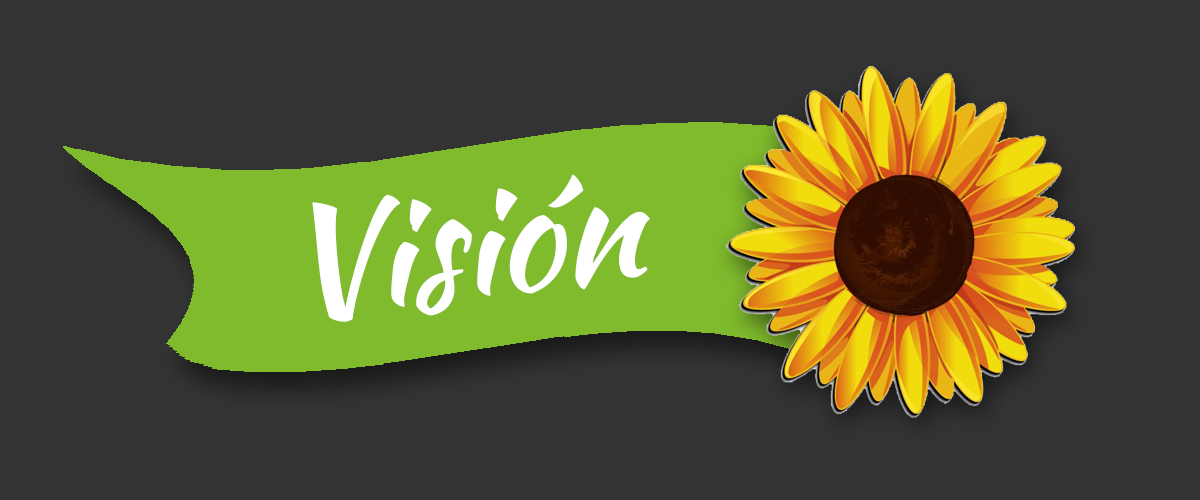
<style>
.page{position:relative;width:1200px;height:500px;background:#333333}
.page>*{position:absolute;margin:0}
.t1{font:150px "KaushanScript-Regular";color:#ffffff}
</style>
<div class="page">
<p class="t1" style="left:312px;top:174px;width:338px;height:148px;rotate:-7deg">Visión</p>
</div>
